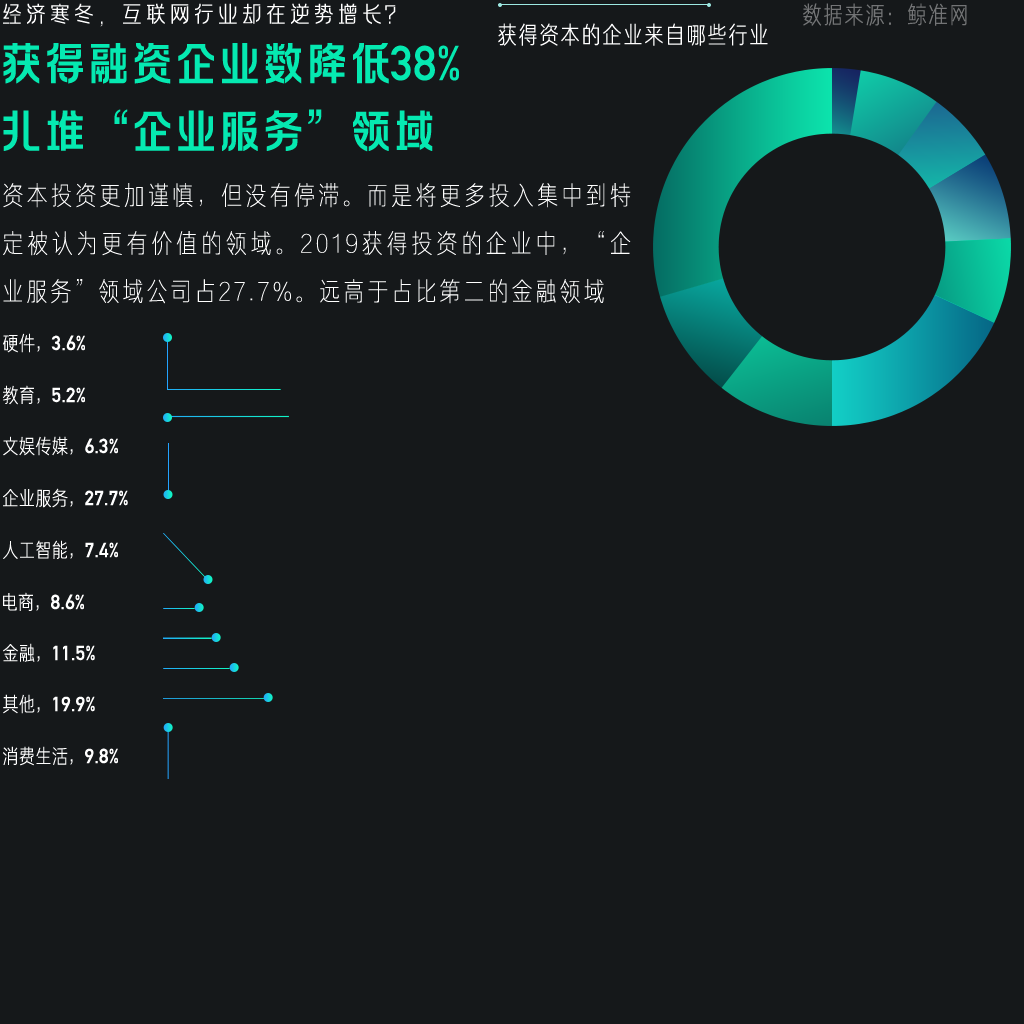
<style>
.page{position:relative;width:1024px;height:1024px;background:#15181a}
.page>*{position:absolute;margin:0}
.t1{font:24px "FZLAGBTTS_XI--GB1-0";color:#ffffff;text-transform:uppercase}
.t2{font:24px "FZJUNH_XIJW--GB1-0";letter-spacing:0.05em;color:#737476;text-transform:uppercase}
.t3{font:24px "FZJUNH_XIJW--GB1-0";letter-spacing:0.05em;color:#ffffff;text-transform:uppercase}
.t4{font:48px/34px "FZLAGBTTS_ZHONG--GB1-0";letter-spacing:-0.09em;color:#05e9b1;text-transform:uppercase}
.t5{font:48px/34px "DINAlternate-Bold";color:#05e9b1;text-transform:uppercase}
.t6{font:26px/48px "FZJUNH_XIANJW--GB1-0";letter-spacing:0.1em;color:#ffffff}
.t7{font:20px "DINAlternate-Bold";color:#ffffff;text-transform:uppercase}
.t8{font:20px "FZJUNH_XIJW--GB1-0";color:#ffffff;text-transform:uppercase}
</style>
<div class="page">
<p class="t1" style="left:3px;top:3px;width:393px;height:24px">经济寒冬，互联网行业却在逆势增长？</p>
<p class="t2" style="left:803px;top:3px;width:164px;height:23px">数据来源：鲸准网</p>
<p class="t3" style="left:498px;top:23px;width:270px;height:23px">获得资本的企业来自哪些行业</p>
<p class="t4" style="left:3px;top:43px;width:456px;height:109px">获得融资企业数降低<span class="t5">38%<br></span><br>扎堆“企业服务”领域</p>
<p class="t6" style="left:3px;top:183px;width:628px;height:121px;text-align:justify">资本投资更加谨慎，但没有停滞。而是将更多投入集中到特定被认为更有价值的领域。2019获得投资的企业中，“企业服务”领域公司占27.7%。远高于占比第二的金融领域</p>
<p class="t7" style="left:3px;top:333px;width:82px;height:20px"><span class="t8">硬件，</span>3.6%</p>
<p class="t7" style="left:3px;top:385px;width:82px;height:20px"><span class="t8">教育，</span>5.2%</p>
<p class="t8" style="left:3px;top:436px;width:115px;height:20px">文娱传媒，<span class="t7">6.3%</span></p>
<p class="t8" style="left:3px;top:488px;width:125px;height:20px">企业服务，<span class="t7">27.7%</span></p>
<p class="t8" style="left:3px;top:540px;width:115px;height:19px">人工智能，<span class="t7">7.4%</span></p>
<p class="t7" style="left:3px;top:592px;width:81px;height:19px"><span class="t8">电商，</span>8.6%</p>
<p class="t7" style="left:3px;top:643px;width:92px;height:19px"><span class="t8">金融，</span>11.5%</p>
<p class="t7" style="left:3px;top:694px;width:92px;height:20px"><span class="t8">其他，</span>19.9%</p>
<p class="t8" style="left:3px;top:746px;width:115px;height:20px">消费生活，<span class="t7">9.8%</span></p>
</div>
